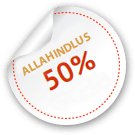
<style>
.page{position:relative;width:135px;height:135px;background:#ffffff}
.page>*{position:absolute;margin:0}
.t1{font:12px "MyriadPro-Bold";color:#dc9e42}
</style>
<div class="page">
<p class="t1" style="left:22px;top:32px;width:69px;height:44px;rotate:-29deg">ALLAHINDLUS</p>
</div>
